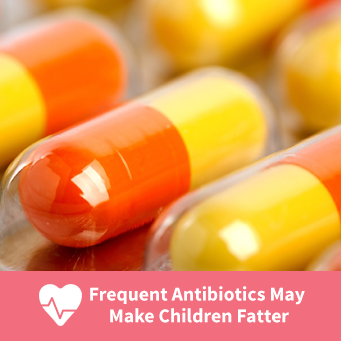
<style>
.page{position:relative;width:341px;height:341px}
.page>*{position:absolute;margin:0}
.t1{font:19.6px/21.6px "SourceSansPro-Bold";color:#ffffff}
</style>
<div class="page">
<p class="t1" style="left:90px;top:286px;width:215px;height:37px;text-align:center">Frequent Antibiotics May <br>Make Children Fatter</p>
</div>
